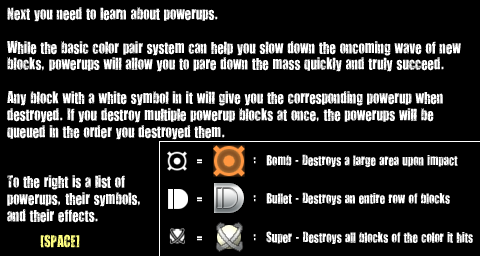
<style>
.page{position:relative;width:480px;height:256px;background:#000000}
.page>*{position:absolute;margin:0}
.t1{font:14px "YouAreLoved";color:#ffffff}
.t2{font:14px "YouAreLoved";color:#ffff80}
.t3{font:12px "YouAreLoved";color:#ffffff}
</style>
<div class="page">
<p class="t1" style="left:7px;top:7px;width:454px;height:241px">Next you need to learn about powerups.<br><br>While the basic color pair system can help you slow down the oncoming wave of new<br>blocks, powerups will allow you to pare down the mass quickly and truly succeed.<br><br>Any block with a white symbol in it will give you the corresponding powerup when<br>destroyed. If you destroy multiple powerup blocks at once, the powerups will be<br>queued in the order you destroyed them.<br><br><br>To the right is a list of<br>powerups, their symbols,<br>and their effects.<br><br>               <span class="t2">[SPACE]</span></p>
<p class="t3" style="left:197px;top:154px;width:261px;height:14px">=               :   Bomb - Destroys a large area upon impact</p>
<p class="t3" style="left:197px;top:192px;width:253px;height:13px">=               :   Bullet - Destroys an entire row of blocks</p>
<p class="t3" style="left:197px;top:231px;width:276px;height:13px">=               :   Super - Destroys all blocks of the color it hits</p>
</div>
